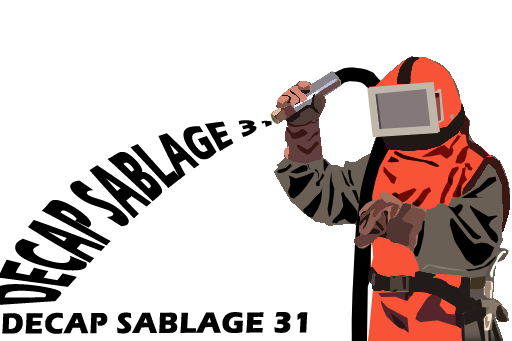
<style>
.page{position:relative;width:512px;height:341px;background:#ffffff}
.page>*{position:absolute;margin:0}
.t1{font:30px "ErasITC-Bold";letter-spacing:0.025em;color:#000000}
</style>
<div class="page">
<p class="t1" style="left:2px;top:312px;width:306px;height:22px">DECAP SABLAGE 31</p>
</div>
